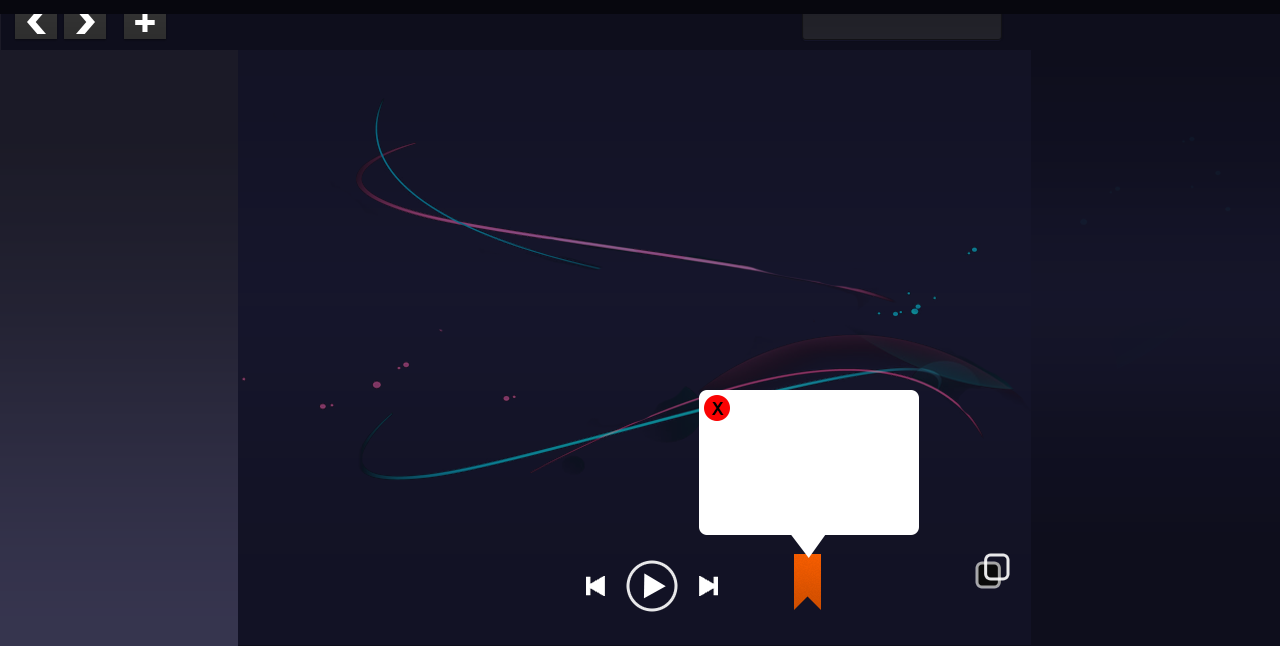
<style>
.page{position:relative;width:1280px;height:646px}
.page>*{position:absolute;margin:0}
.t1{font:41px "Impact";color:#ffffff}
.t2{font:18px "Arial-BoldMT";letter-spacing:-0.01em;color:#000000;text-transform:uppercase}
</style>
<div class="page">
<p class="t1" style="left:135px;top:13px;width:20px;height:19px">+</p>
<p class="t2" style="left:712px;top:402px;width:12px;height:13px">x</p>
</div>
